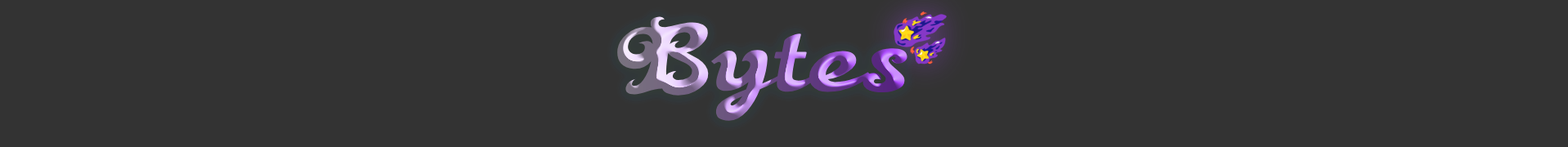
<style>
.page{position:relative;width:1568px;height:147px;background:#333333}
.page>*{position:absolute;margin:0}
.t1{font:108.8px "BlackRose";scale:1.2 1}
</style>
<div class="page">
<p class="t1" style="left:617px;top:16px;width:291px;height:105px">Bytes</p>
</div>
